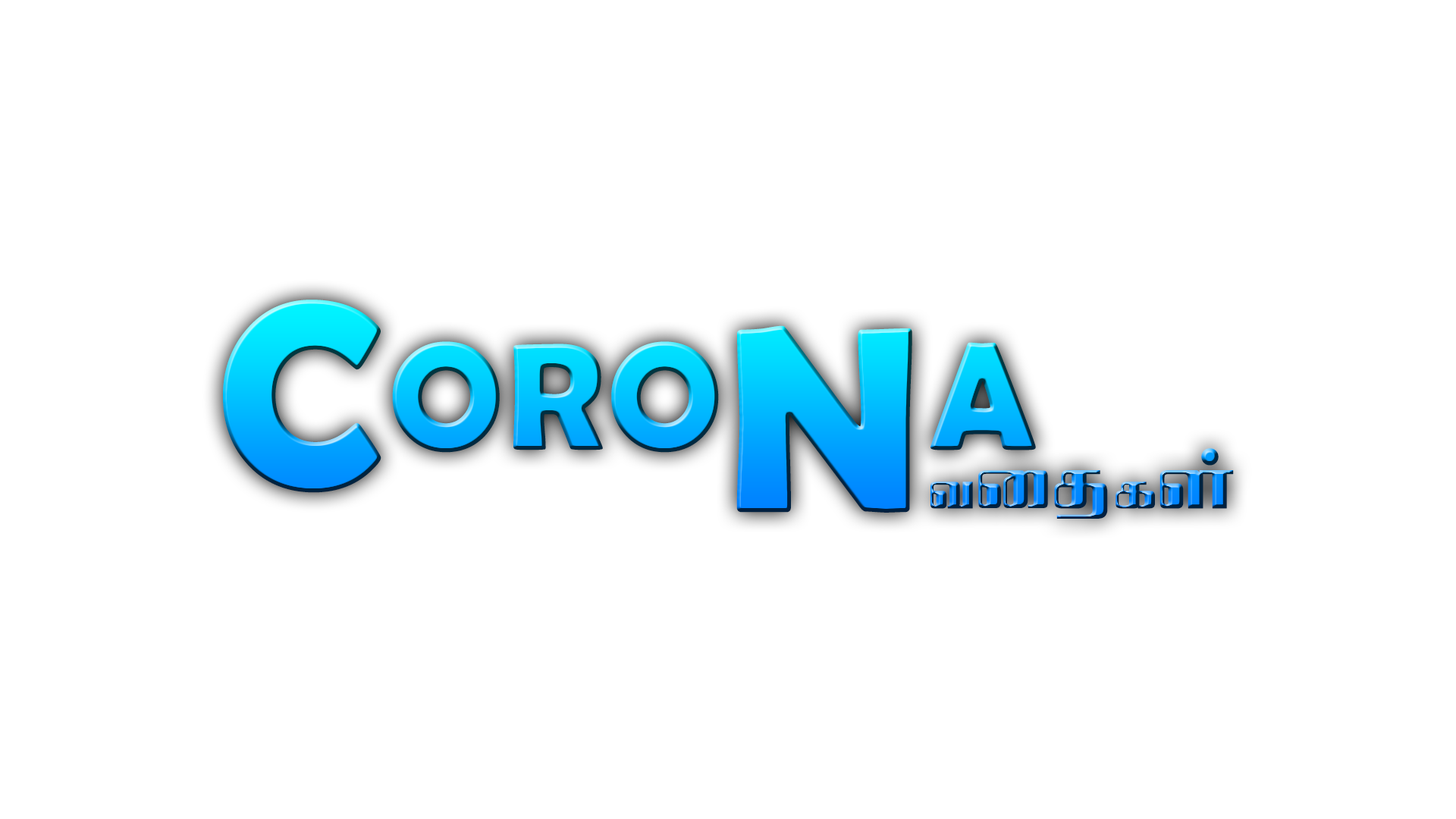
<style>
.page{position:relative;width:1456px;height:819px;background:#ffffff}
.page>*{position:absolute;margin:0}
.t1{font:151.7px "BerlinSansFBDemi-Bold";font-weight:bold}
.t2{font:265.4px "BerlinSansFBDemi-Bold";font-weight:bold}
.t3{font:68.2px "Bavani-Regular";font-weight:bold}
.t4{font:98.6px "Bavani-Regular";font-weight:bold}
</style>
<div class="page">
<p class="t1" style="left:223px;top:300px;width:1011px;height:219px"><span class="t2">C</span>ORO<span class="t2">N</span>A<span class="t3">t</span><span class="t4">ij</span><span class="t3">f</span><span class="t4">s;</span></p>
</div>
